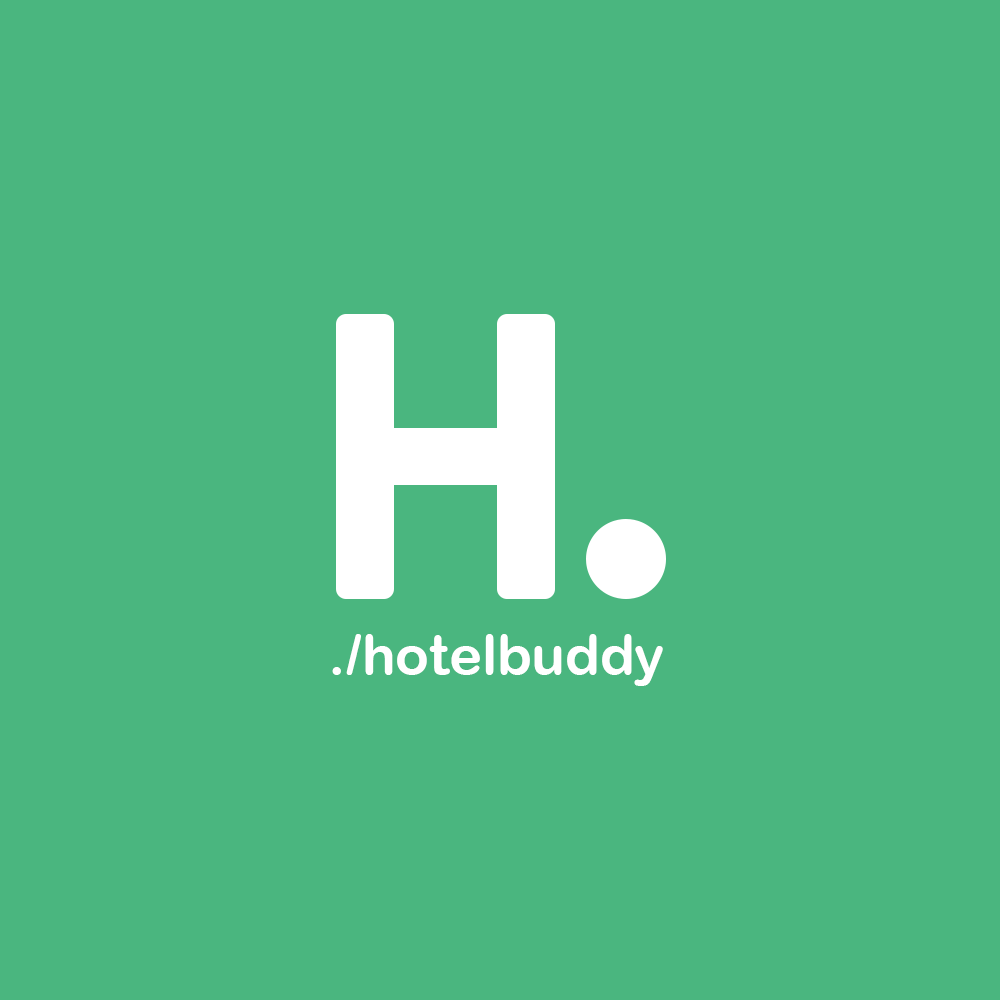
<style>
.page{position:relative;width:1000px;height:1000px;background:#4ab67f}
.page>*{position:absolute;margin:0}
.t1{font:55.7px "ArialRoundedMTBold";color:#ffffff}
</style>
<div class="page">
<p class="t1" style="left:332px;top:634px;width:331px;height:52px">./hotelbuddy</p>
</div>
